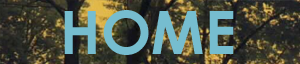
<style>
.page{position:relative;width:300px;height:64px}
.page>*{position:absolute;margin:0}
.t1{font:60px "CenturyGothic-Bold";color:#76bdcf}
</style>
<div class="page">
<p class="t1" style="left:64px;top:10px;width:170px;height:45px">HOME</p>
</div>
